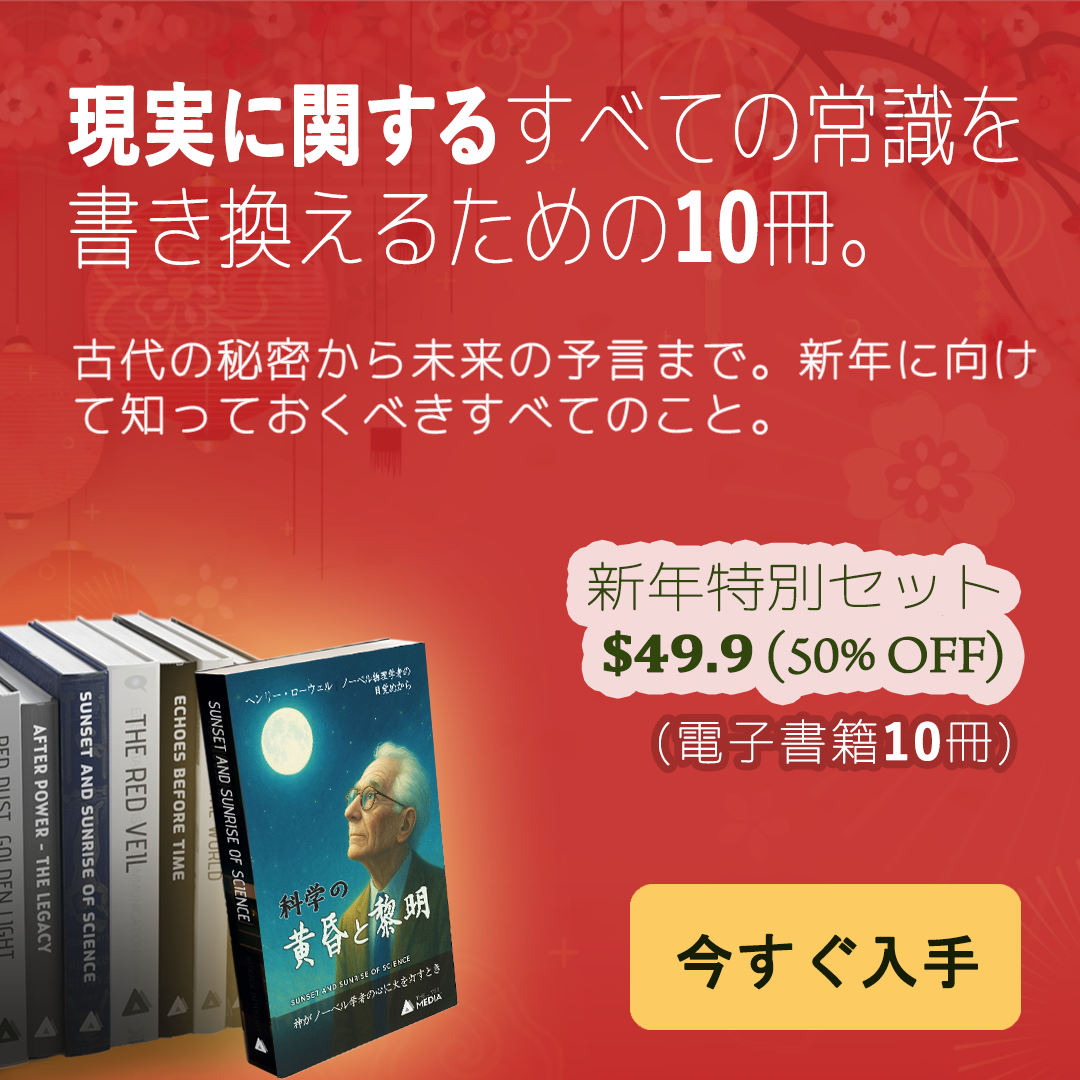
<style>
.page{position:relative;width:1080px;height:1080px}
.page>*{position:absolute;margin:0}
.t1{font:90.2px/102px "Chogokuboso-Gothic";color:#ffffff;font-weight:bold;scale:0.82 1}
.t2{font:90.2px/102px "YuGothic-Bold";color:#ffffff;font-weight:bold;scale:0.82 1}
.t3{font:45px/55px "Chogokuboso-Gothic";letter-spacing:0.05em;color:#ffffff;font-weight:bold}
.t4{font:54px/65px "ArnoPro-LightDisplay";letter-spacing:-0.025em;color:#31460c;font-weight:bold;scale:1.11 1}
.t5{font:54px/65px "Chogokuboso-Gothic";letter-spacing:-0.025em;color:#31460c;font-weight:bold;scale:1.11 1}
.t6{font:54px/65px "Cambria-Bold";letter-spacing:-0.025em;color:#31460c;font-weight:bold;scale:1.11 1}
.t7{font:48px "Chogokuboso-Gothic";letter-spacing:0.05em;color:#ffffff;font-weight:bold}
.t8{font:48px "YuGothic-Bold";letter-spacing:0.05em;color:#ffffff;font-weight:bold}
.t9{font:60px "MS-Gothic";color:#151e05;font-weight:bold}
</style>
<div class="page">
<p class="t1" style="left:68px;top:81px;width:951px;height:188px"><span class="t2">現実に関する</span>すべての常識を書き換えるための<span class="t2">10</span>冊。</p>
<p class="t3" style="left:74px;top:337px;width:962px;height:98px">古代の秘密から未来の予言まで。新年に向けて知っておくべきすべてのこと。</p>
<p class="t4" style="left:588px;top:561px;width:415px;height:123px;text-align:right"><span class="t5">新年特別セット<br> </span><span class="t6">$49.9</span> (50% OFF)</p>
<p class="t7" style="left:659px;top:719px;width:351px;height:47px">(電子書籍<span class="t8">10</span>冊)</p>
<p class="t9" style="left:677px;top:933px;width:301px;height:57px">今すぐ入手</p>
</div>
